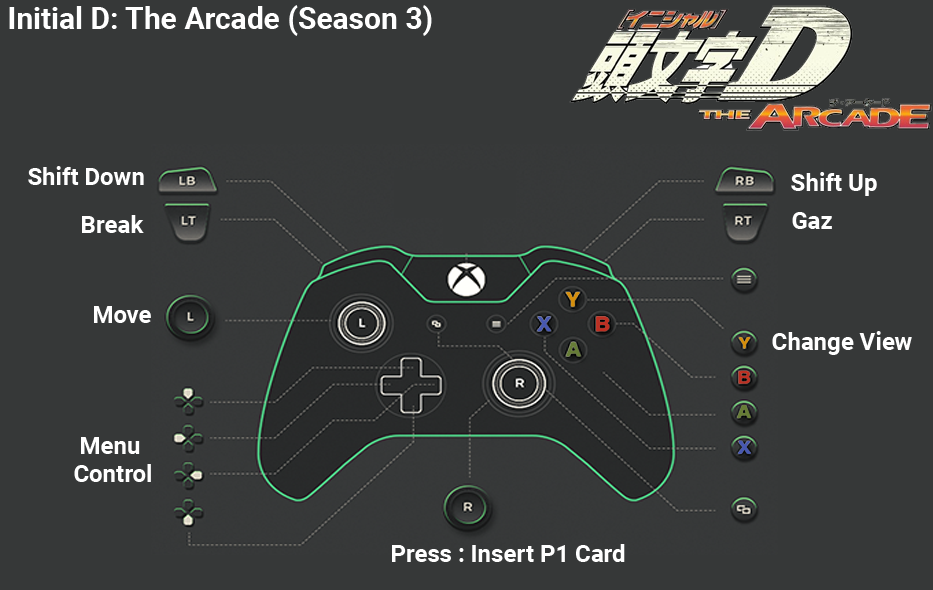
<style>
.page{position:relative;width:933px;height:590px;background:#363838}
.page>*{position:absolute;margin:0}
.t1{font:30px "Roboto-Bold";color:#ffffff}
.t2{font:24px "Roboto-Bold";color:#ffffff}
.t3{font:24px/28px "Roboto-Bold";color:#ffffff}
</style>
<div class="page">
<p class="t1" style="left:9px;top:5px;width:423px;height:31px">Initial D: The Arcade (Season 3)</p>
<p class="t2" style="left:28px;top:166px;width:116px;height:19px">Shift Down</p>
<p class="t2" style="left:791px;top:172px;width:86px;height:24px">Shift Up</p>
<p class="t2" style="left:82px;top:215px;width:62px;height:18px">Break</p>
<p class="t2" style="left:792px;top:212px;width:40px;height:17px">Gaz</p>
<p class="t2" style="left:94px;top:306px;width:57px;height:17px">Move</p>
<p class="t2" style="left:772px;top:331px;width:140px;height:24px">Change View</p>
<p class="t3" style="left:74px;top:437px;width:77px;height:45px;text-align:center">Menu <br>Control</p>
<p class="t2" style="left:392px;top:544px;width:233px;height:18px">Press : Insert P1 Card</p>
</div>
